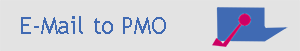
<style>
.page{position:relative;width:300px;height:51px;background:#e3e3e3}
.page>*{position:absolute;margin:0}
.t1{font:23.7px "TrebuchetMS";color:#406ab3}
</style>
<div class="page">
<p class="t1" style="left:21px;top:16px;width:145px;height:18px">E-Mail to PMO</p>
</div>
